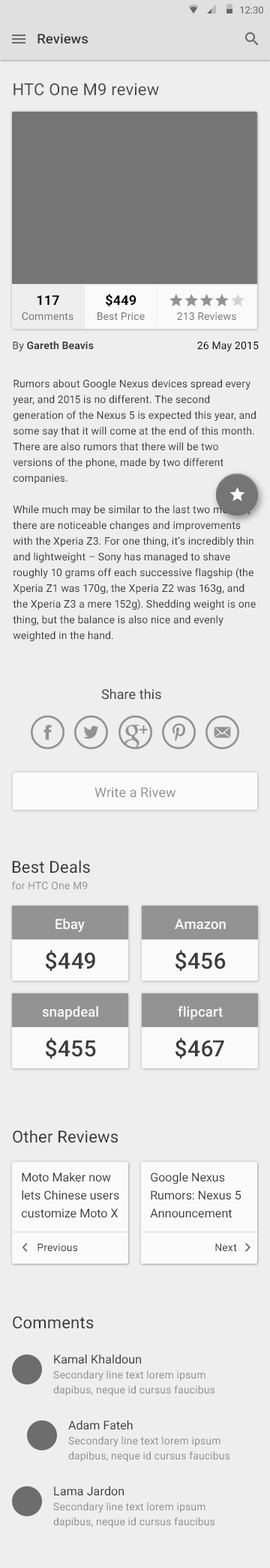
<style>
.page{position:relative;width:270px;height:1568px;background:#eeeeee}
.page>*{position:absolute;margin:0}
.t1{font:13.5px "Roboto-Medium";letter-spacing:0.01em;color:#373737}
.t2{font:16.5px "Roboto-Regular";letter-spacing:0.01em;color:#4b4b4b}
.t3{font:13.5px "Roboto-Bold";letter-spacing:0.01em;color:#000000}
.t4{font:10.5px "Roboto-Regular";letter-spacing:0.01em;color:#757575}
.t5{font:10.5px "Roboto-Bold";letter-spacing:0.01em;color:#3b3b3b}
.t6{font:10.5px "Roboto-Regular";letter-spacing:0.01em;color:#3b3b3b}
.t7{font:10.5px "Roboto-Regular";letter-spacing:0.01em;color:#000000}
.t8{font:10.5px/15.7px "Roboto-Regular";letter-spacing:0.01em;color:#3b3b3b}
.t9{font:13.5px "Roboto-Regular";letter-spacing:0.005em;color:#3f3f3f}
.t10{font:13.5px "Roboto-Regular";letter-spacing:0.005em;color:#939393}
.t11{font:16.5px "Roboto-Regular";letter-spacing:0.01em;color:#373737}
.t12{font:10.5px "Roboto-Regular";letter-spacing:0.01em;color:#939393}
.t13{font:13.8px "Roboto-Medium";letter-spacing:0.01em;color:#fafafa}
.t14{font:22.5px "Roboto-Medium";letter-spacing:0.01em;color:#3d3c3c}
.t15{font:12px/18px "Roboto-Regular";letter-spacing:0.005em;color:#3f3f3f}
.t16{font:10.5px "Roboto-Regular";letter-spacing:0.01em;color:#3f3f3f}
.t17{font:12px "Roboto-Regular";letter-spacing:0.01em;color:#3b3b3b}
.t18{font:10.5px/15px "Roboto-Regular";letter-spacing:0.01em;color:#8f8f8f}
</style>
<div class="page">
<p class="t1" style="left:37px;top:34px;width:51px;height:10px">Reviews</p>
<p class="t2" style="left:13px;top:83px;width:146px;height:13px">HTC One M9 review</p>
<p class="t3" style="left:106px;top:294px;width:30px;height:12px">$449</p>
<p class="t3" style="left:37px;top:295px;width:22px;height:10px">117</p>
<p class="t4" style="left:22px;top:312px;width:51px;height:9px">Comments</p>
<p class="t4" style="left:97px;top:312px;width:48px;height:9px">Best Price</p>
<p class="t4" style="left:177px;top:312px;width:59px;height:9px">213 Reviews</p>
<p class="t5" style="left:13px;top:341px;width:81px;height:10px"><span class="t6">By </span>Gareth Beavis</p>
<p class="t7" style="left:197px;top:342px;width:61px;height:9px">26 May 2015</p>
<p class="t8" style="left:13px;top:379px;width:242px;height:262px">Rumors about Google Nexus devices spread every year, and 2015 is no different. The second generation of the Nexus 5 is expected this year, and some say that it will come at the end of this month. There are also rumors that there will be two versions of the phone, made by two different companies.<br><br>While much may be similar to the last two models, there are noticeable changes and improvements with the Xperia Z3. For one thing, it’s incredibly thin and lightweight – Sony has managed to shave roughly 10 grams off each successive flagship (the Xperia Z1 was 170g, the Xperia Z2 was 163g, and the Xperia Z3 a mere 152g). Shedding weight is one thing, but the balance is also nice and evenly weighted in the hand.</p>
<p class="t9" style="left:101px;top:688px;width:60px;height:12px">Share this</p>
<p class="t10" style="left:94px;top:787px;width:81px;height:11px">Write a Rivew</p>
<p class="t11" style="left:12px;top:860px;width:78px;height:14px">Best Deals</p>
<p class="t12" style="left:12px;top:881px;width:76px;height:9px">for HTC One M9</p>
<p class="t13" style="left:55px;top:918px;width:30px;height:14px">Ebay</p>
<p class="t13" style="left:175px;top:918px;width:50px;height:12px">Amazon</p>
<p class="t14" style="left:46px;top:950px;width:49px;height:21px">$449</p>
<p class="t14" style="left:175px;top:950px;width:50px;height:21px">$456</p>
<p class="t13" style="left:42px;top:1006px;width:56px;height:14px">snapdeal</p>
<p class="t13" style="left:178px;top:1006px;width:45px;height:14px">flipcart</p>
<p class="t14" style="left:46px;top:1038px;width:50px;height:21px">$455</p>
<p class="t14" style="left:175px;top:1038px;width:49px;height:21px">$467</p>
<p class="t11" style="left:13px;top:1130px;width:105px;height:13px">Other Reviews</p>
<p class="t15" style="left:22px;top:1172px;width:97px;height:46px">Moto Maker now lets Chinese users customize Moto X</p>
<p class="t15" style="left:150px;top:1172px;width:90px;height:46px">Google Nexus Rumors: Nexus 5 Announcement This Month?</p>
<p class="t16" style="left:37px;top:1244px;width:40px;height:8px">Previous</p>
<p class="t16" style="left:215px;top:1244px;width:22px;height:8px">Next</p>
<p class="t11" style="left:13px;top:1316px;width:81px;height:13px">Comments</p>
<p class="t17" style="left:54px;top:1354px;width:87px;height:10px">Kamal Khaldoun</p>
<p class="t18" style="left:53px;top:1370px;width:161px;height:26px">Secondary line text lorem ipsum dapibus, neque id cursus faucibus</p>
<p class="t17" style="left:68px;top:1420px;width:65px;height:10px">Adam Fateh</p>
<p class="t18" style="left:68px;top:1436px;width:161px;height:26px">Secondary line text lorem ipsum dapibus, neque id cursus faucibus</p>
<p class="t17" style="left:54px;top:1486px;width:70px;height:10px">Lama Jardon</p>
<p class="t18" style="left:53px;top:1502px;width:161px;height:26px">Secondary line text lorem ipsum dapibus, neque id cursus faucibus</p>
</div>
